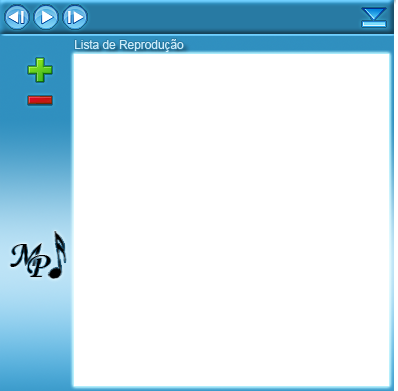
<style>
.page{position:relative;width:398px;height:391px;background:#ffffff}
.page>*{position:absolute;margin:0}
.t1{font:12px "ArialMT";color:#cdebf9}
.t2{font:38.4px "MonotypeCorsiva";color:#000000}
</style>
<div class="page">
<p class="t1" style="left:75px;top:39px;width:109px;height:13px">Lista de Reprodução</p>
<p class="t2" style="left:10px;top:243px;width:32px;height:24px">M</p>
<p class="t2" style="left:27px;top:255px;width:24px;height:22px">P</p>
</div>
